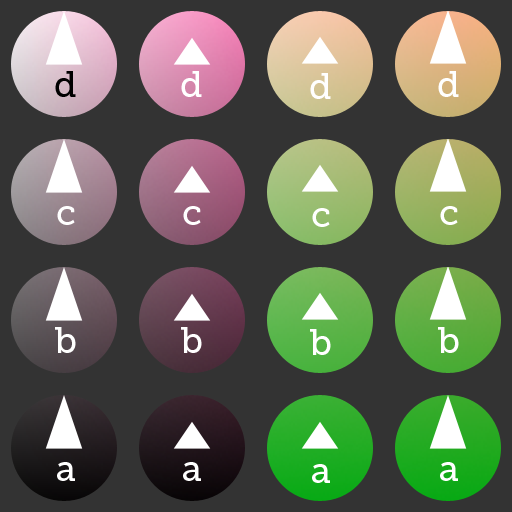
<style>
.page{position:relative;width:512px;height:512px;background:#333333}
.page>*{position:absolute;margin:0}
.t1{font:36px "MuseoSlab-500";color:#000000}
.t2{font:36px "MuseoSlab-500";color:#ffffff}
</style>
<div class="page">
<p class="t1" style="left:55px;top:71px;width:21px;height:26px">d</p>
<p class="t2" style="left:181px;top:71px;width:21px;height:26px">d</p>
<p class="t2" style="left:310px;top:73px;width:21px;height:26px">d</p>
<p class="t2" style="left:438px;top:71px;width:21px;height:26px">d</p>
<p class="t2" style="left:57px;top:206px;width:18px;height:19px">c</p>
<p class="t2" style="left:183px;top:206px;width:18px;height:19px">c</p>
<p class="t2" style="left:312px;top:208px;width:18px;height:19px">c</p>
<p class="t2" style="left:440px;top:206px;width:18px;height:19px">c</p>
<p class="t2" style="left:55px;top:327px;width:21px;height:26px">b</p>
<p class="t2" style="left:181px;top:327px;width:21px;height:26px">b</p>
<p class="t2" style="left:310px;top:329px;width:21px;height:26px">b</p>
<p class="t2" style="left:438px;top:327px;width:21px;height:26px">b</p>
<p class="t2" style="left:57px;top:462px;width:18px;height:19px">a</p>
<p class="t2" style="left:183px;top:462px;width:18px;height:19px">a</p>
<p class="t2" style="left:440px;top:462px;width:18px;height:19px">a</p>
<p class="t2" style="left:312px;top:464px;width:18px;height:19px">a</p>
</div>
